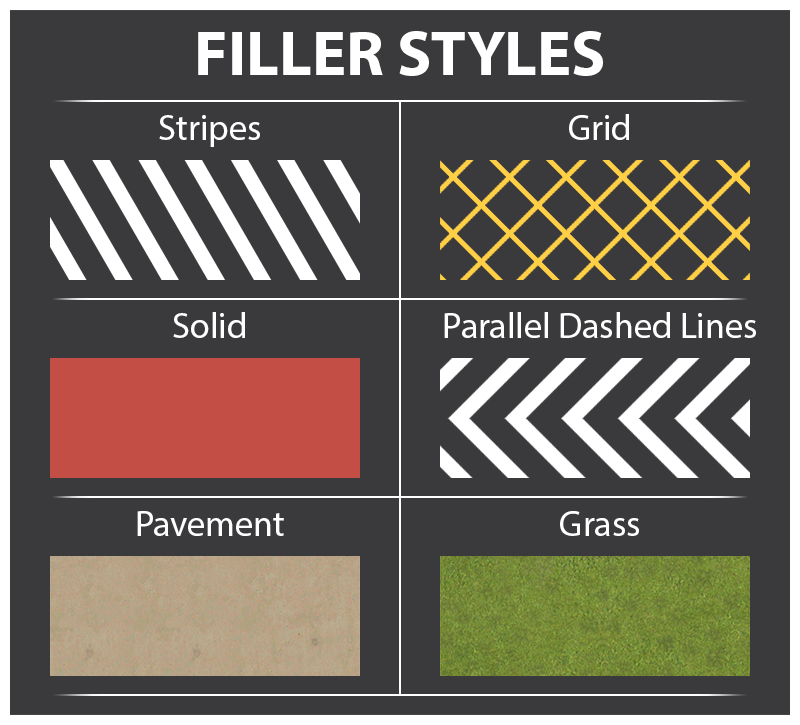
<style>
.page{position:relative;width:800px;height:725px;background:#3a3a3c}
.page>*{position:absolute;margin:0}
.t1{font:64px "MyriadPro-Bold";color:#ffffff}
.t2{font:36px "MyriadPro-Regular";color:#ffffff}
</style>
<div class="page">
<p class="t1" style="left:198px;top:31px;width:405px;height:45px">FILLER STYLES</p>
<p class="t2" style="left:159px;top:115px;width:101px;height:32px">Stripes</p>
<p class="t2" style="left:569px;top:114px;width:60px;height:26px">Grid</p>
<p class="t2" style="left:173px;top:312px;width:72px;height:26px">Solid</p>
<p class="t2" style="left:444px;top:312px;width:312px;height:26px">Parallel Dashed Lines</p>
<p class="t2" style="left:137px;top:511px;width:147px;height:25px">Pavement</p>
<p class="t2" style="left:560px;top:511px;width:79px;height:25px">Grass</p>
</div>
